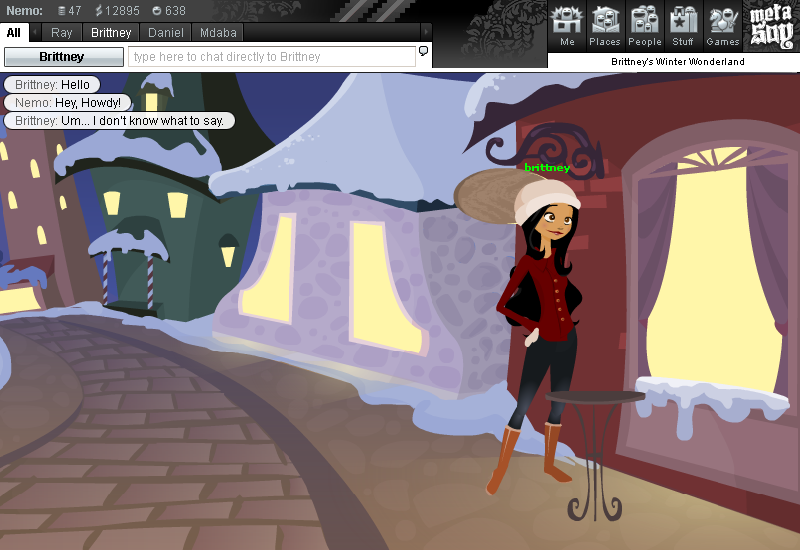
<style>
.page{position:relative;width:800px;height:550px}
.page>*{position:absolute;margin:0}
.t1{font:12px "Arial-BoldMT";color:#aab5b9}
.t2{font:12px "ArialMT";color:#aab5b9}
.t3{font:12px "Arial-BoldMT";color:#010100}
.t4{font:12px "ArialMT";color:#ffffff}
.t5{font:10px "ArialMT";color:#aab5b9}
.t6{font:12px "Arial-BoldMT";color:#000000}
.t7{font:12px "ArialMT";color:#adadad}
.t8{font:10px "ArialMT";color:#000000}
.t9{font:12px/18px "ArialMT";color:#000000}
.t10{font:12px/18px "ArialMT";color:#656565}
</style>
<div class="page">
<p class="t1" style="left:7px;top:6px;width:35px;height:9px">Nemo:</p>
<p class="t2" style="left:69px;top:6px;width:12px;height:9px">47</p>
<p class="t2" style="left:106px;top:6px;width:33px;height:9px">12895</p>
<p class="t2" style="left:166px;top:6px;width:19px;height:9px">638</p>
<p class="t3" style="left:7px;top:28px;width:13px;height:9px">All</p>
<p class="t2" style="left:52px;top:28px;width:20px;height:11px">Ray</p>
<p class="t4" style="left:92px;top:28px;width:39px;height:11px">Brittney</p>
<p class="t2" style="left:149px;top:28px;width:34px;height:9px">Daniel</p>
<p class="t2" style="left:201px;top:28px;width:35px;height:9px">Mdaba</p>
<p class="t5" style="left:561px;top:38px;width:13px;height:7px">Me</p>
<p class="t5" style="left:590px;top:38px;width:30px;height:7px">Places</p>
<p class="t5" style="left:629px;top:38px;width:32px;height:9px">People</p>
<p class="t5" style="left:673px;top:38px;width:20px;height:7px">Stuff</p>
<p class="t5" style="left:707px;top:38px;width:32px;height:7px">Games</p>
<p class="t6" style="left:40px;top:52px;width:44px;height:11px">Brittney</p>
<p class="t7" style="left:134px;top:52px;width:186px;height:11px">type here to chat directly to Brittney</p>
<p class="t8" style="left:612px;top:58px;width:132px;height:9px">Brittney’s Winter Wonderland</p>
<p class="t9" style="left:16px;top:80px;width:207px;height:47px"><span class="t10">Brittney:</span> Hello<br><span class="t10">Nemo:</span> Hey, Howdy!<br><span class="t10">Brittney:</span> Um... I don’t know what to say.</p>
</div>
